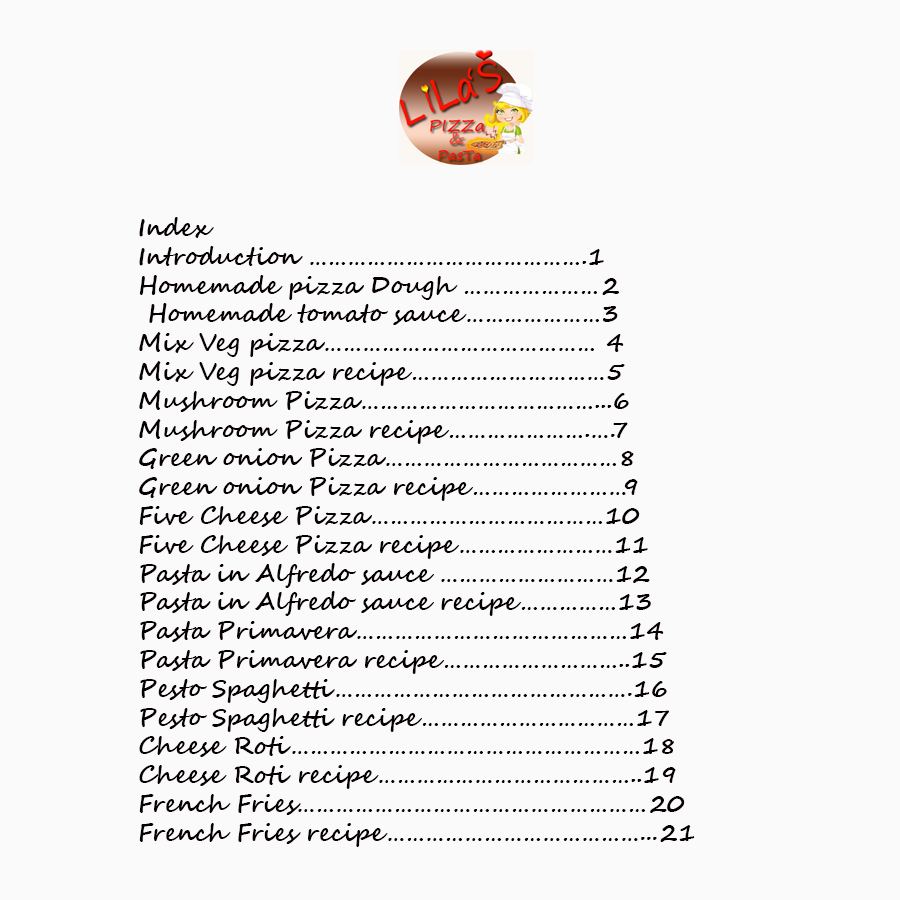
<style>
.page{position:relative;width:900px;height:900px;background:#fbfafa}
.page>*{position:absolute;margin:0}
.t1{font:24px "SegoeScript-Bold";color:#070000}
</style>
<div class="page">
<p class="t1" style="left:139px;top:217px;width:556px;height:630px">Index<br>Introduction …………………………………….1<br>Homemade pizza Dough …………………2<br> Homemade tomato sauce…………………3<br>Mix Veg pizza…………………………………… 4<br>Mix Veg pizza recipe…………………………5<br>Mushroom Pizza………………………………...6<br>Mushroom Pizza recipe………………….….7<br>Green onion Pizza………………………………8<br>Green onion Pizza recipe……………………9<br>Five Cheese Pizza………………………………10<br>Five Cheese Pizza recipe……………………11<br>Pasta in Alfredo sauce ………………………12<br>Pasta in Alfredo sauce recipe……………13<br>Pasta Primavera……………………………………14<br>Pasta Primavera recipe………………………..15<br>Pesto Spaghetti……………………………………….16<br>Pesto Spaghetti recipe……………………………17<br>Cheese Roti………………………………………………18<br>Cheese Roti recipe…………………………………..19<br>French Fries………………………………………………20<br>French Fries recipe…………………………………...21</p>
</div>
